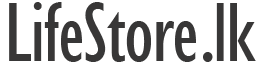
<style>
.page{position:relative;width:260px;height:65px;background:#ffffff}
.page>*{position:absolute;margin:0}
.t1{font:86.9px "GillSansMT-Condensed";letter-spacing:-0.02em;color:#383737}
</style>
<div class="page">
<p class="t1" style="left:9px;top:2px;width:247px;height:60px">LifeStore.lk</p>
</div>
